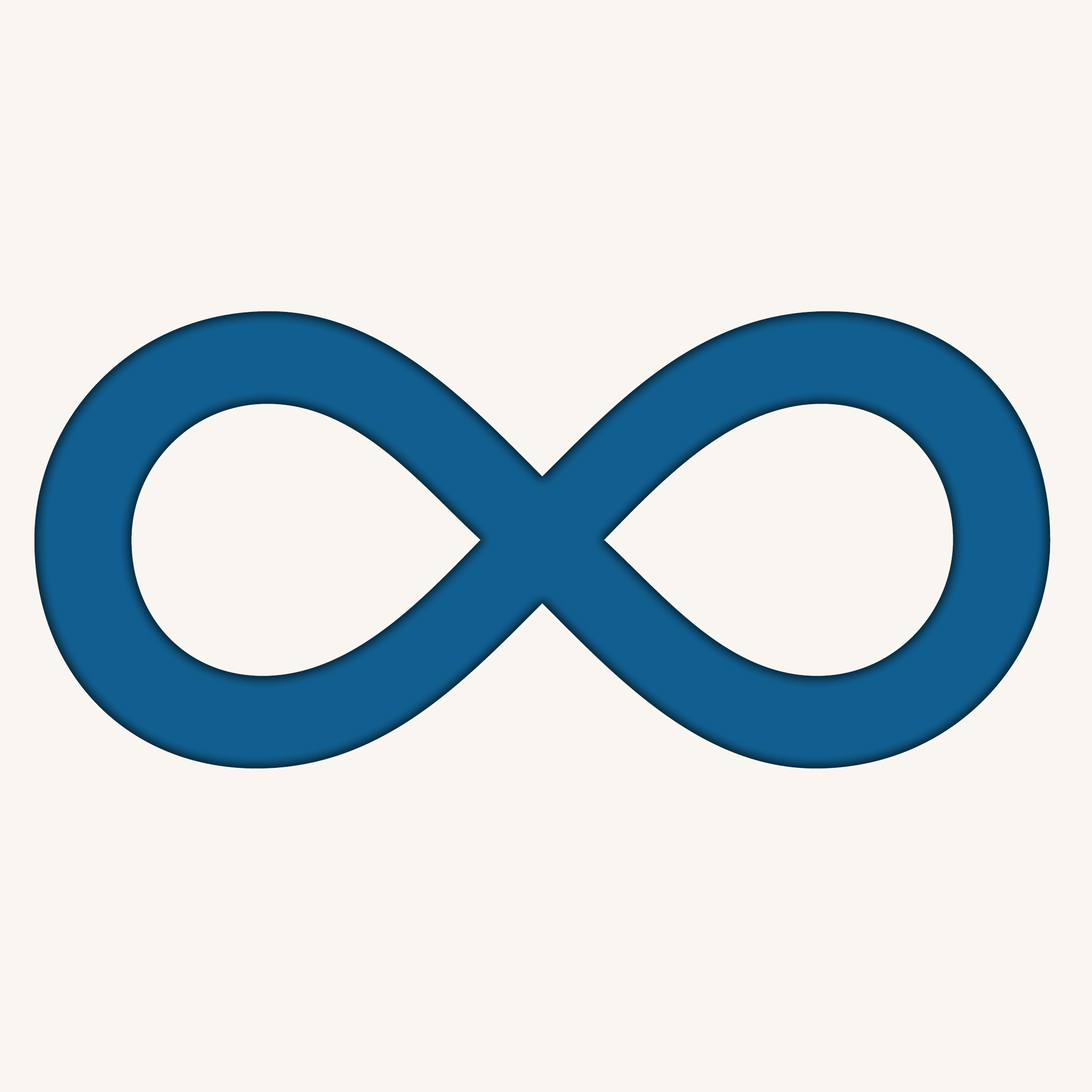
<style>
.page{position:relative;width:1092px;height:1092px;background:#f9f6f1}
.page>*{position:absolute;margin:0}
.t1{font:1545.1px "MyriadPro-Regular";letter-spacing:0.01em;color:#115f90;font-variant:small-caps}
</style>
<div class="page">
<p class="t1" style="left:34px;top:311px;width:1016px;height:458px">∞</p>
</div>
